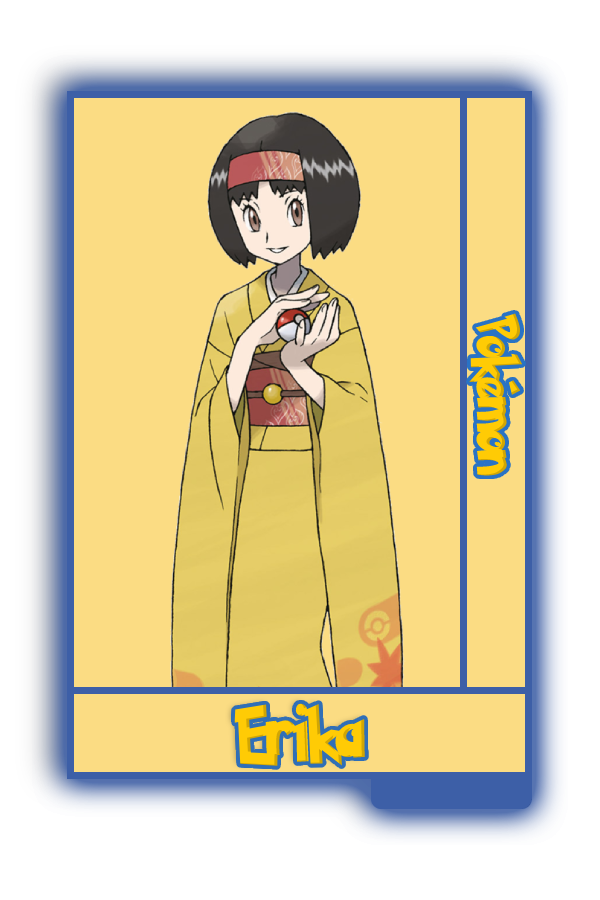
<style>
.page{position:relative;width:600px;height:900px;background:#fbdc83}
.page>*{position:absolute;margin:0}
.t1{font:48.8px "PokemonSolidNormal";color:#ffcb05;scale:0.8 1}
.t2{font:56.6px "PokemonSolidNormal";color:#ffcb05;scale:0.92 1}
</style>
<div class="page">
<p class="t1" style="left:469px;top:313px;width:54px;height:163px;rotate:90deg">Pokémon</p>
<p class="t2" style="left:234px;top:703px;width:131px;height:63px">Erika</p>
</div>
